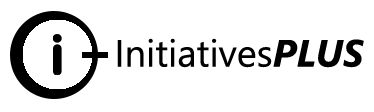
<style>
.page{position:relative;width:374px;height:112px;background:#ffffff}
.page>*{position:absolute;margin:0}
.t1{font:37.9px "SegoeUI";color:#000000}
.t2{font:37.9px "SegoeUI-BoldItalic";color:#000000}
</style>
<div class="page">
<p class="t1" style="left:117px;top:38px;width:247px;height:30px">Initiatives<span class="t2">PLUS</span></p>
</div>
